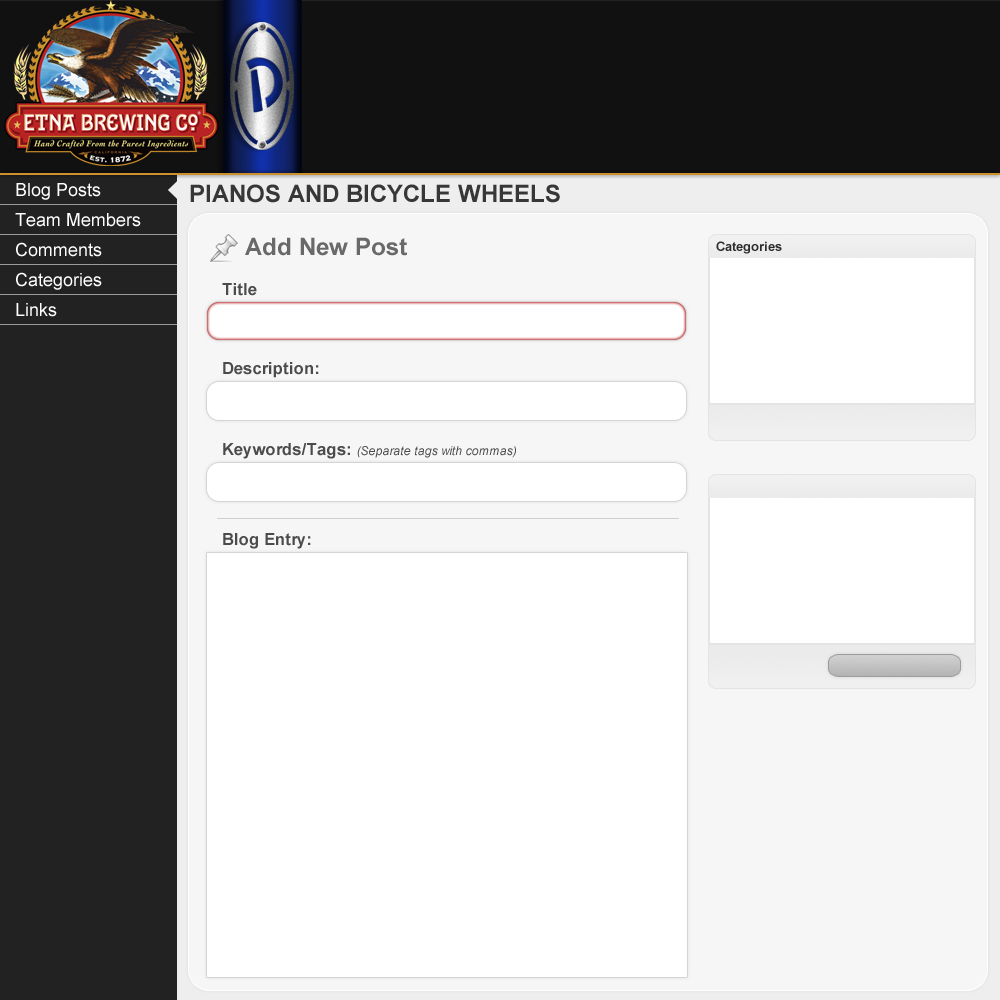
<style>
.page{position:relative;width:1000px;height:1000px;background:#ffffff}
.page>*{position:absolute;margin:0}
.t1{font:18px "ArialMT";color:#ffffff}
.t2{font:24px "Arial-BoldMT";color:#222222;text-transform:uppercase}
.t3{font:24px "Arial-BoldMT";color:#696969}
.t4{font:13px "Arial-BoldMT";color:#2d2d2d}
.t5{font:16.4px "Arial-BoldMT";color:#4b4b4b}
.t6{font:12px "Arial-ItalicMT";color:#4b4b4b}
</style>
<div class="page">
<p class="t1" style="left:16px;top:183px;width:85px;height:17px">Blog Posts</p>
<p class="t2" style="left:190px;top:184px;width:370px;height:19px">Pianos and Bicycle Wheels</p>
<p class="t1" style="left:15px;top:213px;width:126px;height:14px">Team Members</p>
<p class="t1" style="left:16px;top:242px;width:86px;height:15px">Comments</p>
<p class="t3" style="left:245px;top:237px;width:162px;height:19px">Add New Post</p>
<p class="t4" style="left:716px;top:241px;width:66px;height:13px">Categories</p>
<p class="t1" style="left:16px;top:272px;width:86px;height:18px">Categories</p>
<p class="t5" style="left:222px;top:283px;width:35px;height:13px">Title</p>
<p class="t1" style="left:16px;top:303px;width:41px;height:14px">Links</p>
<p class="t5" style="left:223px;top:362px;width:96px;height:16px">Description:</p>
<p class="t6" style="left:223px;top:443px;width:293px;height:16px"><span class="t5">Keywords/Tags: </span>(Separate tags with commas)</p>
<p class="t5" style="left:223px;top:533px;width:88px;height:16px">Blog Entry:</p>
</div>
